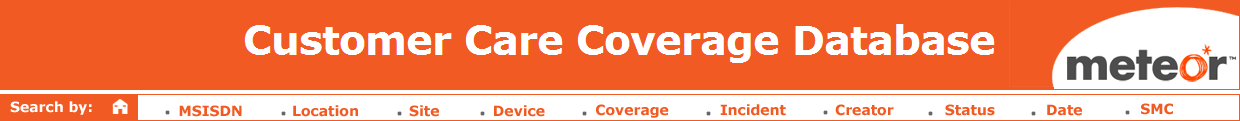
<style>
.page{position:relative;width:1240px;height:121px;background:#f15b23}
.page>*{position:absolute;margin:0}
.t1{font:14px "Verdana-Bold";color:#ffffff}
.t2{font:14px "Verdana-Bold";color:#f15b23}
</style>
<div class="page">
<p class="t1" style="left:10px;top:101px;width:82px;height:14px">Search by:</p>
<p class="t2" style="left:179px;top:105px;width:63px;height:12px">MSISDN</p>
<p class="t2" style="left:293px;top:105px;width:65px;height:12px">Location</p>
<p class="t2" style="left:409px;top:105px;width:30px;height:12px">Site</p>
<p class="t2" style="left:494px;top:105px;width:51px;height:12px">Device</p>
<p class="t2" style="left:596px;top:104px;width:73px;height:14px">Coverage</p>
<p class="t2" style="left:720px;top:104px;width:66px;height:12px">Incident</p>
<p class="t2" style="left:835px;top:104px;width:59px;height:12px">Creator</p>
<p class="t2" style="left:945px;top:104px;width:50px;height:12px">Status</p>
<p class="t2" style="left:1047px;top:104px;width:35px;height:12px">Date</p>
<p class="t2" style="left:1141px;top:103px;width:32px;height:12px">SMC</p>
</div>
